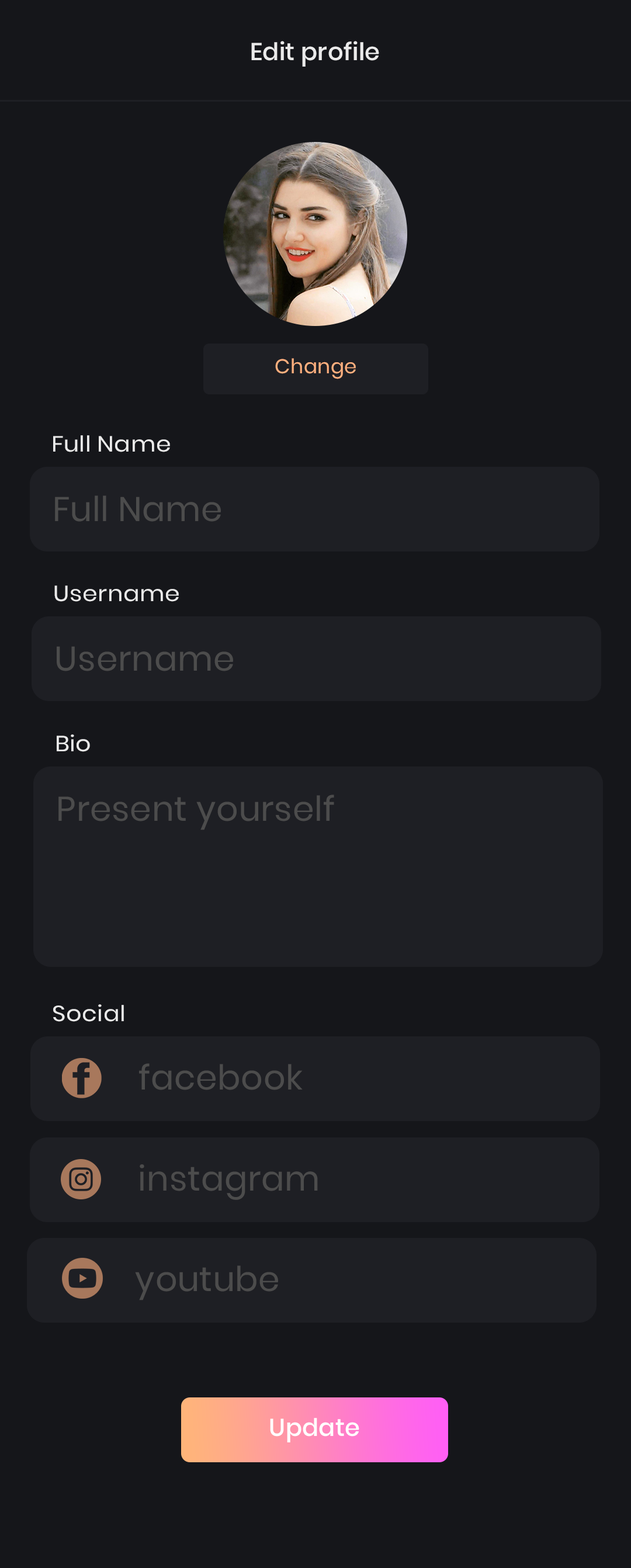
<style>
.page{position:relative;width:631px;height:1568px;background:#15161a}
.page>*{position:absolute;margin:0}
.t1{font:24.3px "Poppins-Medium";letter-spacing:0.01em;color:#eaeaea}
.t2{font:20px "Poppins-Regular";letter-spacing:0.01em;color:#ffb07f}
.t3{font:21.9px "Poppins-Regular";letter-spacing:0.01em;color:#eaeaea;scale:1.1 1}
.t4{font:34.3px "Poppins-Regular";letter-spacing:0.01em;color:#4c4c4c}
.t5{font:24.3px "Poppins-Medium";letter-spacing:0.01em;color:#ffffff}
</style>
<div class="page">
<p class="t1" style="left:251px;top:41px;width:128px;height:26px">Edit profile</p>
<p class="t2" style="left:275px;top:358px;width:81px;height:21px">Change</p>
<p class="t3" style="left:53px;top:435px;width:117px;height:17px">Full Name</p>
<p class="t4" style="left:55px;top:495px;width:166px;height:27px">Full Name</p>
<p class="t3" style="left:54px;top:585px;width:125px;height:17px">Username</p>
<p class="t4" style="left:57px;top:646px;width:176px;height:25px">Username</p>
<p class="t3" style="left:57px;top:734px;width:33px;height:18px">Bio</p>
<p class="t4" style="left:58px;top:795px;width:276px;height:35px">Present yourself</p>
<p class="t3" style="left:53px;top:1004px;width:71px;height:18px">Social</p>
<p class="t4" style="left:139px;top:1063px;width:164px;height:27px">facebook</p>
<p class="t4" style="left:140px;top:1164px;width:178px;height:36px">instagram</p>
<p class="t4" style="left:135px;top:1265px;width:143px;height:35px">youtube</p>
<p class="t5" style="left:270px;top:1418px;width:89px;height:24px">Update</p>
</div>
